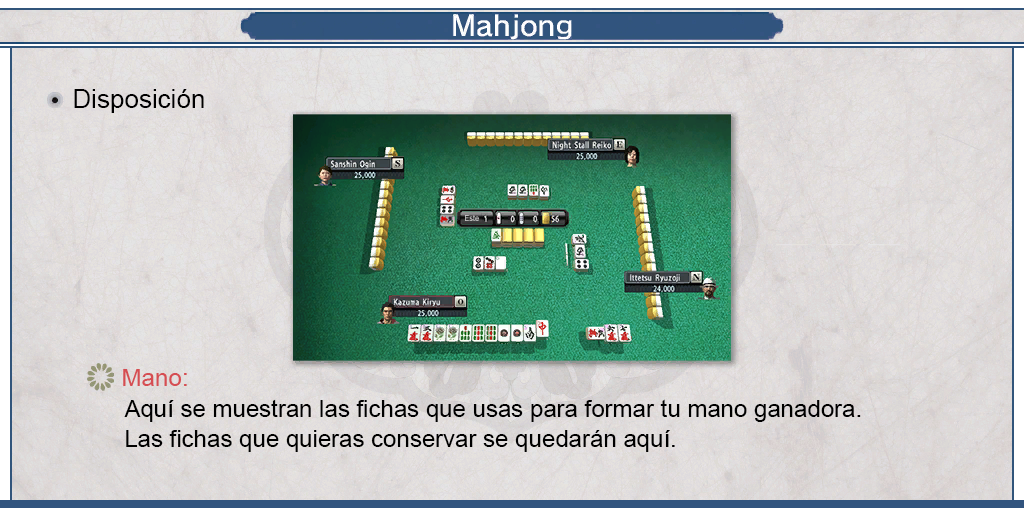
<style>
.page{position:relative;width:1024px;height:512px}
.page>*{position:absolute;margin:0}
.t1{font:26px "ArialMT";color:#000000}
.t2{font:24px "ArialMT";color:#d64d52}
.t3{font:24px/30px "ArialMT";color:#000000}
</style>
<div class="page">
<p class="t1" style="left:74px;top:89px;width:130px;height:24px">Disposición</p>
<p class="t2" style="left:123px;top:369px;width:64px;height:17px">Mano:</p>
<p class="t3" style="left:124px;top:399px;width:737px;height:53px;text-align:justify">Aquí se muestran las fichas que usas para formar tu mano ganadora.<br>Las fichas que quieras conservar se quedarán aquí.</p>
</div>
